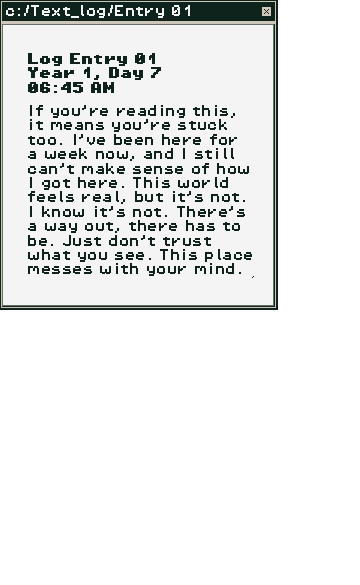
<style>
.page{position:relative;width:360px;height:585px;background:#ffffff}
.page>*{position:absolute;margin:0}
.t1{font:12px "PixelOperator8";color:#f4f4f4}
.t2{font:12px "PixelOperator8-Bold";color:#0e231c}
.t3{font:12px "PixelOperator8";color:#0e231c}
</style>
<div class="page">
<p class="t1" style="left:6px;top:5px;width:184px;height:13px">c:/Text_log/Entry 01</p>
<p class="t2" style="left:28px;top:53px;width:133px;height:40px">Log Entry 01 <br>Year 1, Day 7<br>06:45 AM</p>
<p class="t3" style="left:28px;top:105px;width:224px;height:171px">If you’re reading this, it means you’re stuck too. I’ve been here for a week now, and I still can’t make sense of how I got here. This world feels real, but it’s not. I know it’s not. There’s a way out, there has to be. Just don’t trust what you see. This place messes with your mind.</p>
</div>
